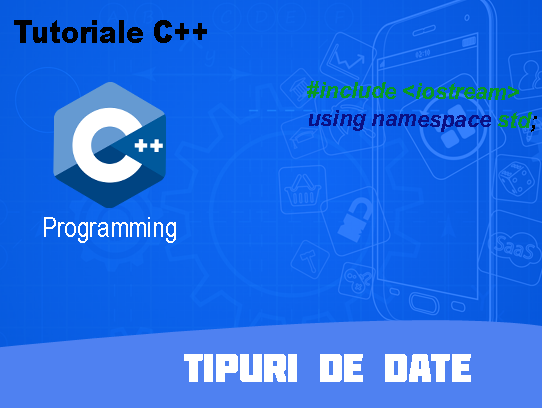
<style>
.page{position:relative;width:542px;height:408px}
.page>*{position:absolute;margin:0}
.t1{font:30.6px "Arial-Black";color:#000000;scale:0.87 1}
.t2{font:23.1px "ArialNarrow-BoldItalic";color:#099a21;scale:1.16 1}
.t3{font:23.1px "ArialNarrow-BoldItalic";color:#0a1084;scale:1.16 1}
.t4{font:23.1px "ArialNarrow-BoldItalic";color:#000000;scale:1.16 1}
.t5{font:40px "Molot";color:#ffffff}
</style>
<div class="page">
<p class="t1" style="left:14px;top:20px;width:193px;height:23px">Tutoriale C++</p>
<p class="t2" style="left:307px;top:81px;width:230px;height:51px;rotate:1deg">#include &lt;iostream&gt;<br><span class="t3">using namespace </span>std<span class="t4">;</span></p>
<p class="t5" style="left:184px;top:354px;width:287px;height:28px">Tipuri de date</p>
</div>
